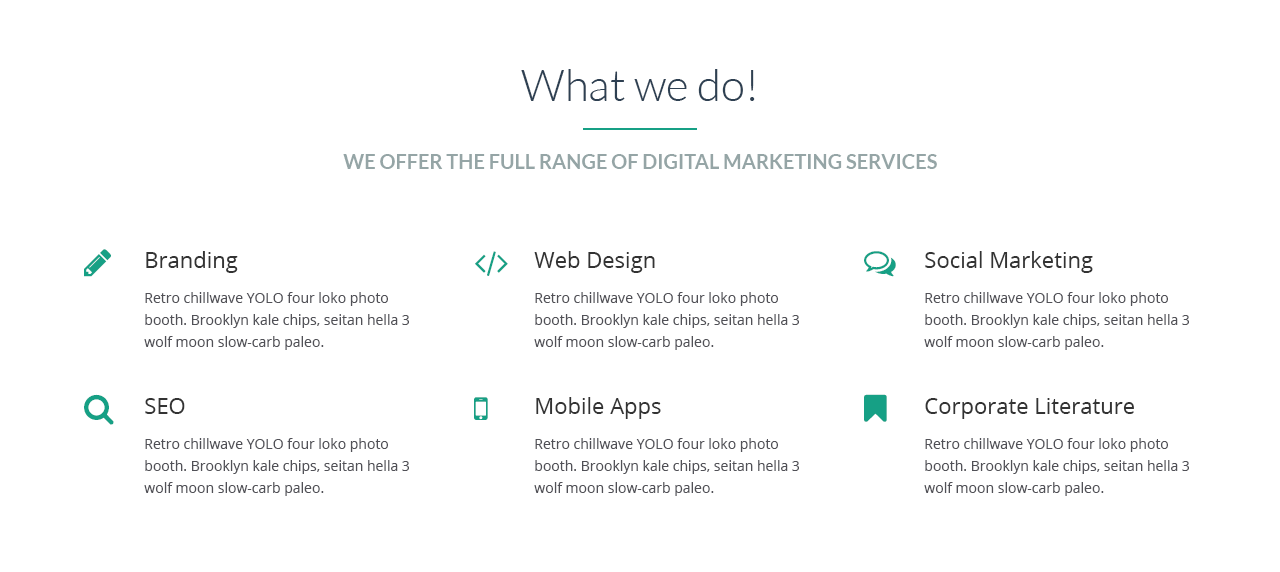
<style>
.page{position:relative;width:1280px;height:572px;background:#ffffff}
.page>*{position:absolute;margin:0}
.t1{font:44px "Lato-Light";color:#2e4052}
.t2{font:20px "Lato-Bold";color:#95a5a6}
.t3{font:22px "OpenSans";color:#333333}
.t4{font:14px/22px "OpenSans";color:#515157}
</style>
<div class="page">
<p class="t1" style="left:521px;top:69px;width:234px;height:32px">What we do!</p>
<p class="t2" style="left:343px;top:154px;width:594px;height:15px">WE OFFER THE FULL RANGE OF DIGITAL MARKETING SERVICES</p>
<p class="t3" style="left:146px;top:251px;width:92px;height:22px">Branding</p>
<p class="t3" style="left:534px;top:251px;width:121px;height:22px">Web Design</p>
<p class="t3" style="left:925px;top:251px;width:168px;height:22px">Social Marketing</p>
<p class="t4" style="left:144px;top:292px;width:265px;height:58px">Retro chillwave YOLO four loko photo booth. Brooklyn kale chips, seitan hella 3 wolf moon slow-carb paleo.</p>
<p class="t4" style="left:534px;top:292px;width:265px;height:58px">Retro chillwave YOLO four loko photo booth. Brooklyn kale chips, seitan hella 3 wolf moon slow-carb paleo.</p>
<p class="t4" style="left:924px;top:292px;width:265px;height:58px">Retro chillwave YOLO four loko photo booth. Brooklyn kale chips, seitan hella 3 wolf moon slow-carb paleo.</p>
<p class="t3" style="left:145px;top:398px;width:40px;height:16px">SEO</p>
<p class="t3" style="left:536px;top:397px;width:125px;height:22px">Mobile Apps</p>
<p class="t3" style="left:925px;top:398px;width:209px;height:21px">Corporate Literature</p>
<p class="t4" style="left:144px;top:438px;width:265px;height:58px">Retro chillwave YOLO four loko photo booth. Brooklyn kale chips, seitan hella 3 wolf moon slow-carb paleo.</p>
<p class="t4" style="left:534px;top:438px;width:265px;height:58px">Retro chillwave YOLO four loko photo booth. Brooklyn kale chips, seitan hella 3 wolf moon slow-carb paleo.</p>
<p class="t4" style="left:924px;top:438px;width:265px;height:58px">Retro chillwave YOLO four loko photo booth. Brooklyn kale chips, seitan hella 3 wolf moon slow-carb paleo.</p>
</div>
